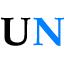
<style>
.page{position:relative;width:64px;height:64px;background:#ffffff}
.page>*{position:absolute;margin:0}
.t1{font:40px "BookAntiqua-Bold";letter-spacing:0.02em;color:#000000}
.t2{font:40px "BookAntiqua-Bold";letter-spacing:0.02em;color:#0180ff}
</style>
<div class="page">
<p class="t1" style="left:1px;top:17px;width:63px;height:29px">U<span class="t2">N</span></p>
</div>
